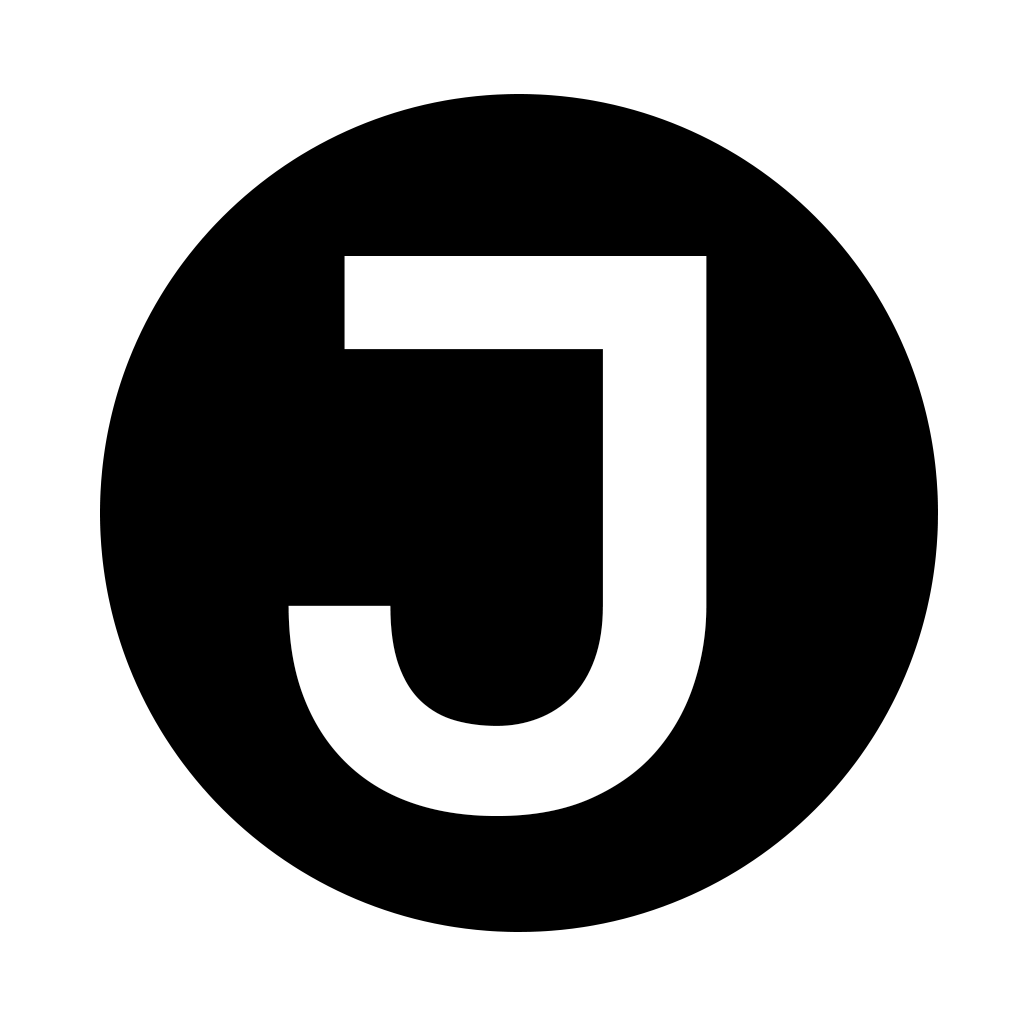
<style>
.page{position:relative;width:1024px;height:1024px;background:#ffffff}
.page>*{position:absolute;margin:0}
.t1{font:774.6px "Opificio-Bold";color:#ffffff;scale:1.11 1}
</style>
<div class="page">
<p class="t1" style="left:288px;top:256px;width:419px;height:560px">J</p>
</div>
